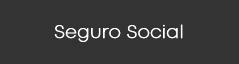
<style>
.page{position:relative;width:239px;height:64px;background:#333333}
.page>*{position:absolute;margin:0}
.t1{font:18px "Mont-ExtraLightDEMO";color:#ffffff;font-weight:bold}
</style>
<div class="page">
<p class="t1" style="left:54px;top:24px;width:129px;height:18px">Seguro Social</p>
</div>
